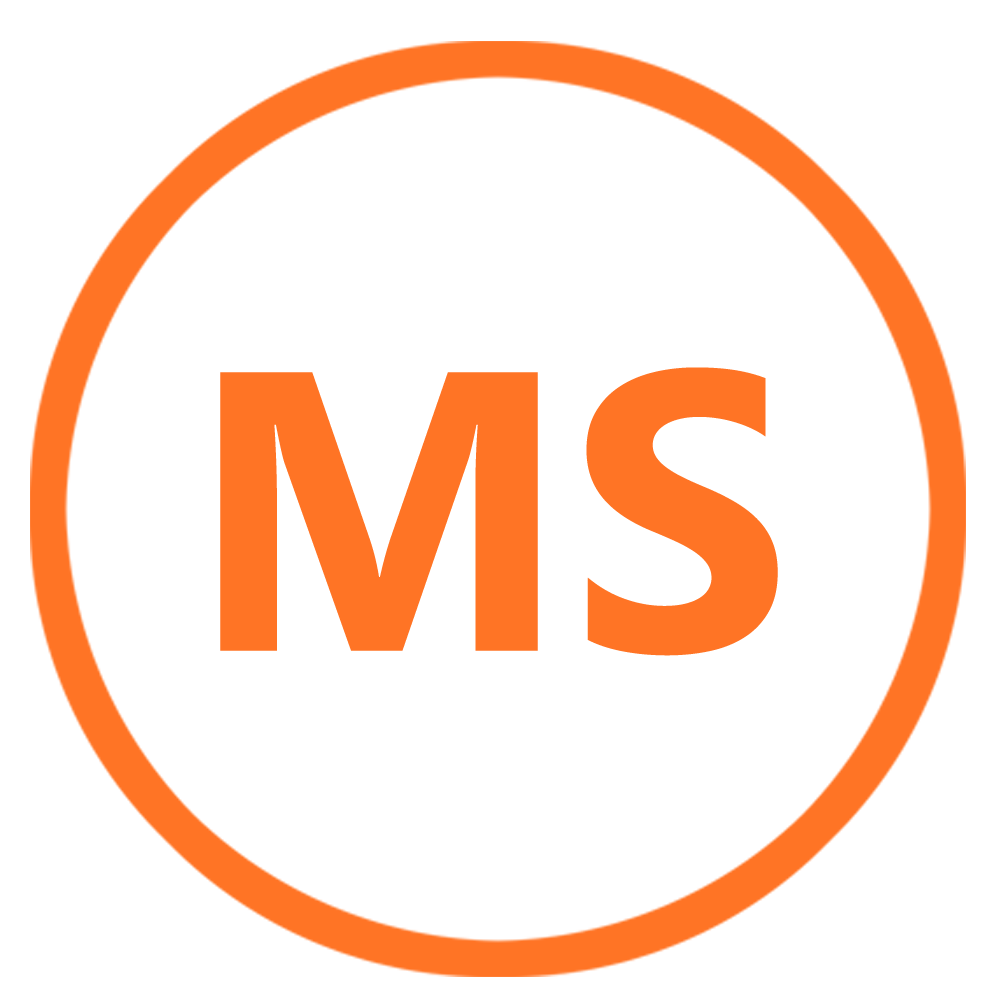
<style>
.page{position:relative;width:1000px;height:1000px;background:#ffffff}
.page>*{position:absolute;margin:0}
.t1{font:397.4px "Ebrima-Bold";color:#ff7425}
</style>
<div class="page">
<p class="t1" style="left:220px;top:367px;width:558px;height:289px">MS</p>
</div>
